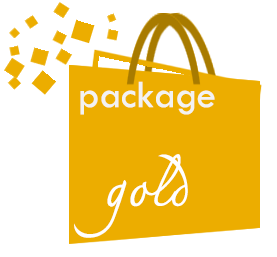
<style>
.page{position:relative;width:277px;height:257px;background:#ffffff}
.page>*{position:absolute;margin:0}
.t1{font:39.5px "TwCenMT-Regular";color:#ffffff}
.t2{font:61.9px "THCharmonman";color:#ffffff}
</style>
<div class="page">
<p class="t1" style="left:80px;top:81px;width:135px;height:34px">package</p>
<p class="t2" style="left:74px;top:154px;width:114px;height:84px">gold</p>
</div>
